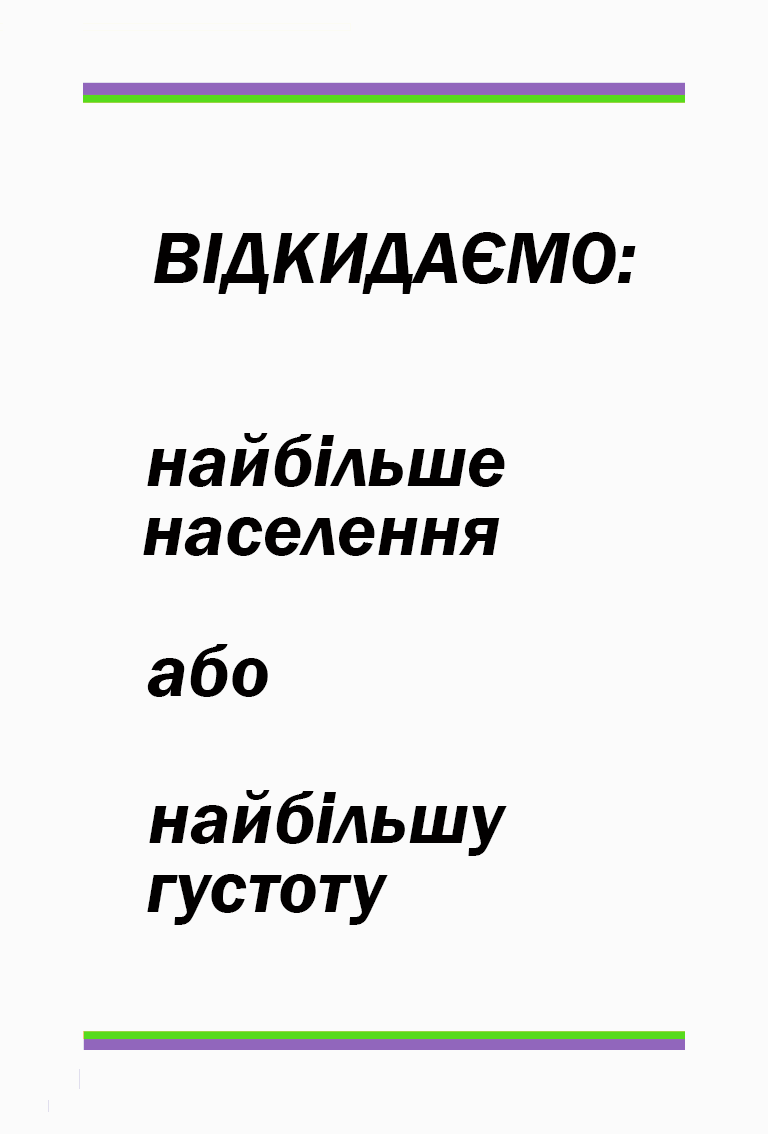
<style>
.page{position:relative;width:768px;height:1134px;background:#fbfbfb}
.page>*{position:absolute;margin:0}
.t1{font:75px "FranklinGothic-DemiItalic";color:#020000}
</style>
<div class="page">
<p class="t1" style="left:153px;top:232px;width:483px;height:62px">ВІДКИДАЄМО:</p>
<p class="t1" style="left:147px;top:433px;width:358px;height:54px">найбільше</p>
<p class="t1" style="left:143px;top:517px;width:357px;height:39px">населення</p>
<p class="t1" style="left:147px;top:644px;width:121px;height:53px">або</p>
<p class="t1" style="left:149px;top:790px;width:358px;height:66px">найбільшу</p>
<p class="t1" style="left:147px;top:874px;width:241px;height:51px">густоту</p>
</div>
